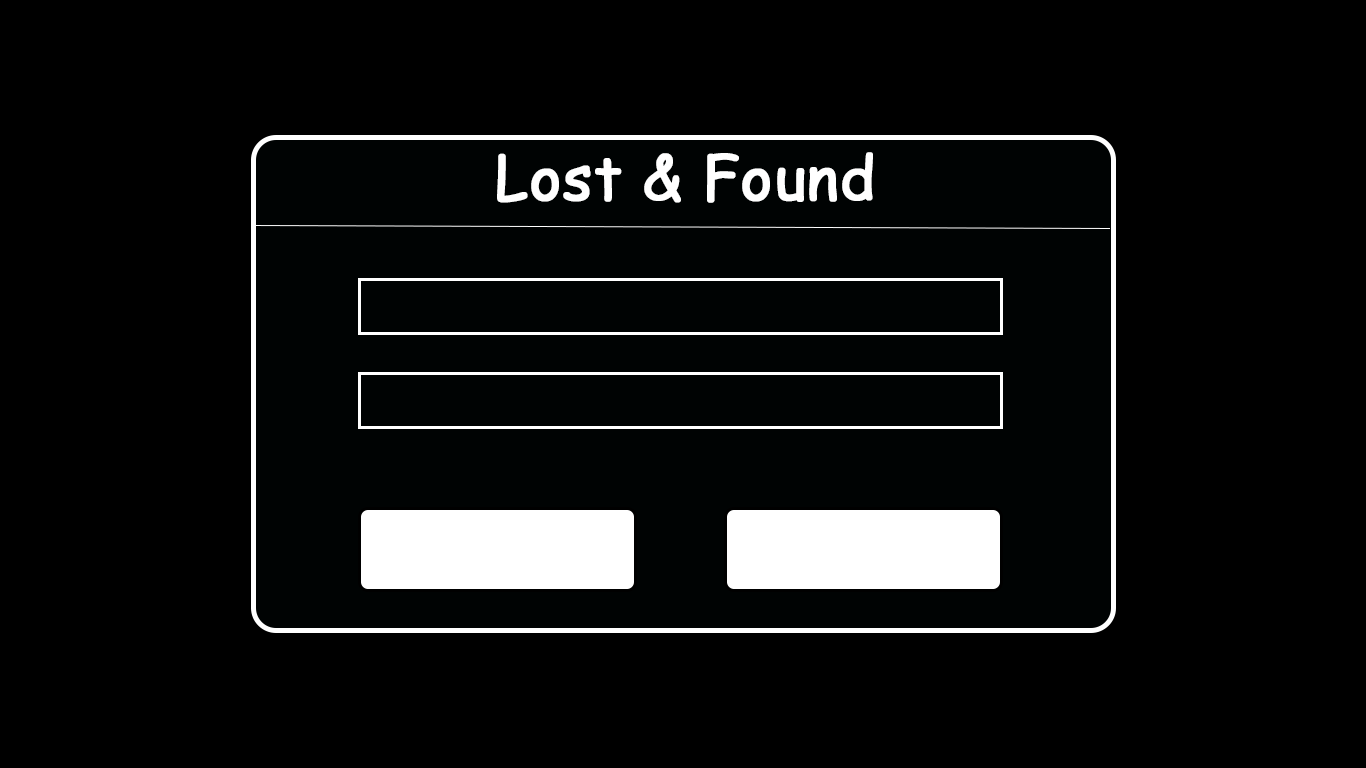
<style>
.page{position:relative;width:1366px;height:768px;background:#000000}
.page>*{position:absolute;margin:0}
.t1{font:60px "ComicSansMS";color:#ffffff;font-weight:bold}
</style>
<div class="page">
<p class="t1" style="left:497px;top:152px;width:376px;height:51px">Lost &amp; Found</p>
</div>
